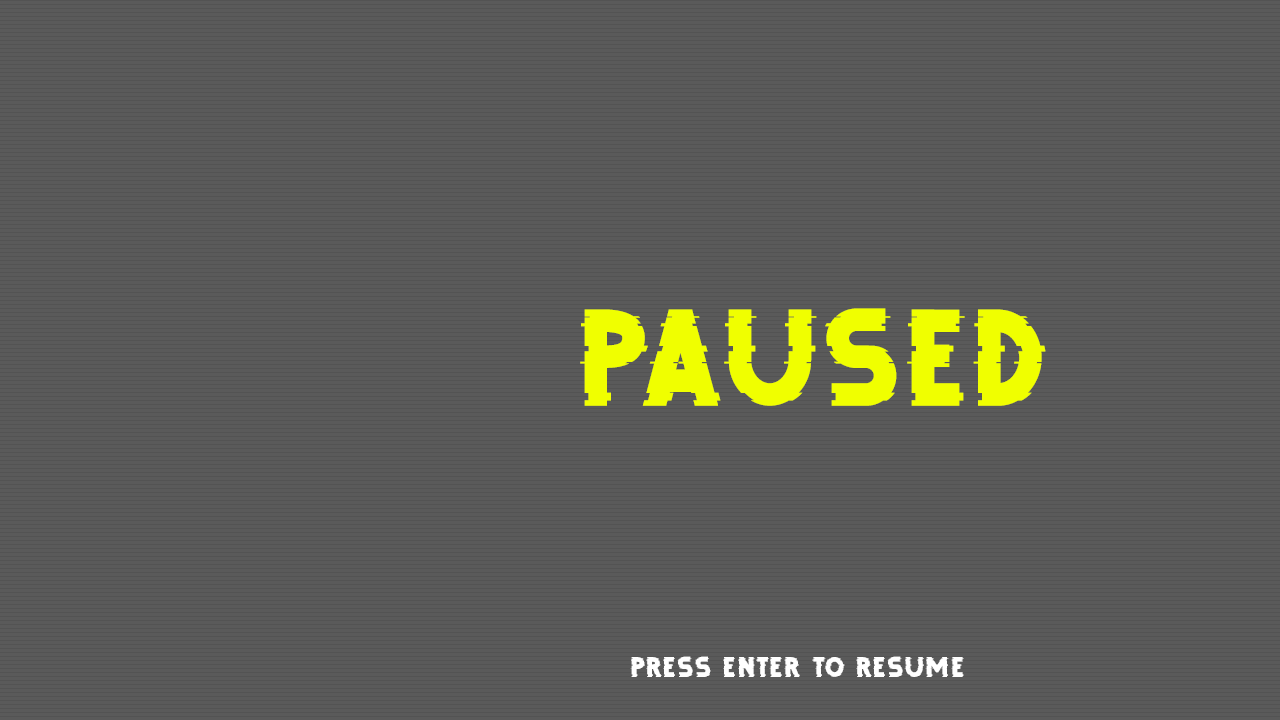
<style>
.page{position:relative;width:1280px;height:720px;background:#5a5a5a}
.page>*{position:absolute;margin:0}
.t1{font:200px "DEBUGFREETRIAL";color:#f0ff00}
.t2{font:41.7px "DEBUGFREETRIAL";color:#ffffff}
</style>
<div class="page">
<p class="t1" style="left:580px;top:308px;width:466px;height:98px">PAUSED</p>
<p class="t2" style="left:630px;top:656px;width:334px;height:21px">press enter to resume</p>
</div>
